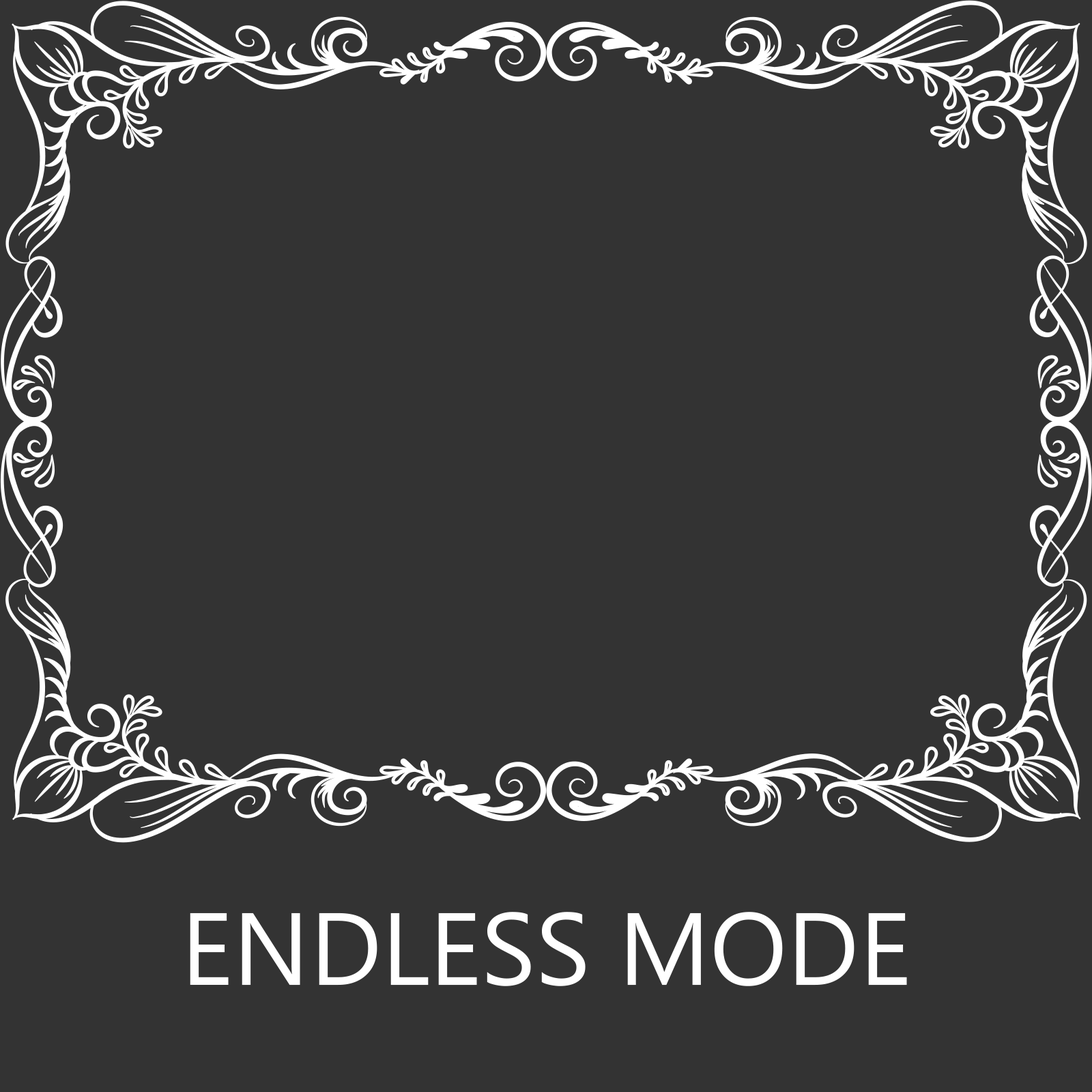
<style>
.page{position:relative;width:1092px;height:1092px;background:#333333}
.page>*{position:absolute;margin:0}
.t1{font:102.3px "NirmalaUI";color:#ffffff}
</style>
<div class="page">
<p class="t1" style="left:190px;top:912px;width:717px;height:74px">ENDLESS MODE</p>
</div>
